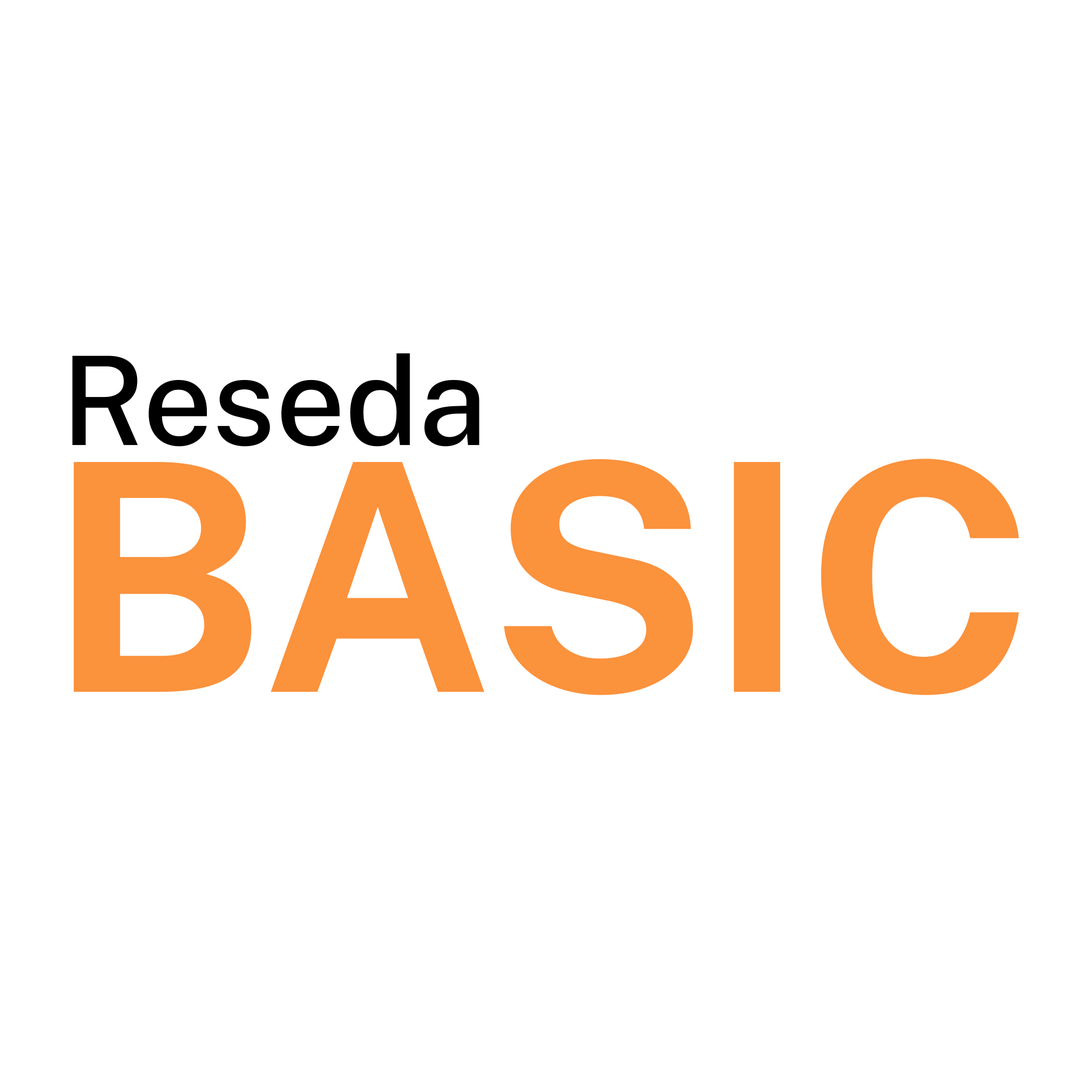
<style>
.page{position:relative;width:1092px;height:1092px;background:#ffffff}
.page>*{position:absolute;margin:0}
.t1{font:123.3px "PublicSans-Medium";color:#000000}
.t2{font:317.8px "PublicSans-Bold";color:#fb923c}
</style>
<div class="page">
<p class="t1" style="left:72px;top:353px;width:407px;height:94px">Reseda</p>
<p class="t2" style="left:74px;top:459px;width:945px;height:236px">BASIC</p>
</div>
